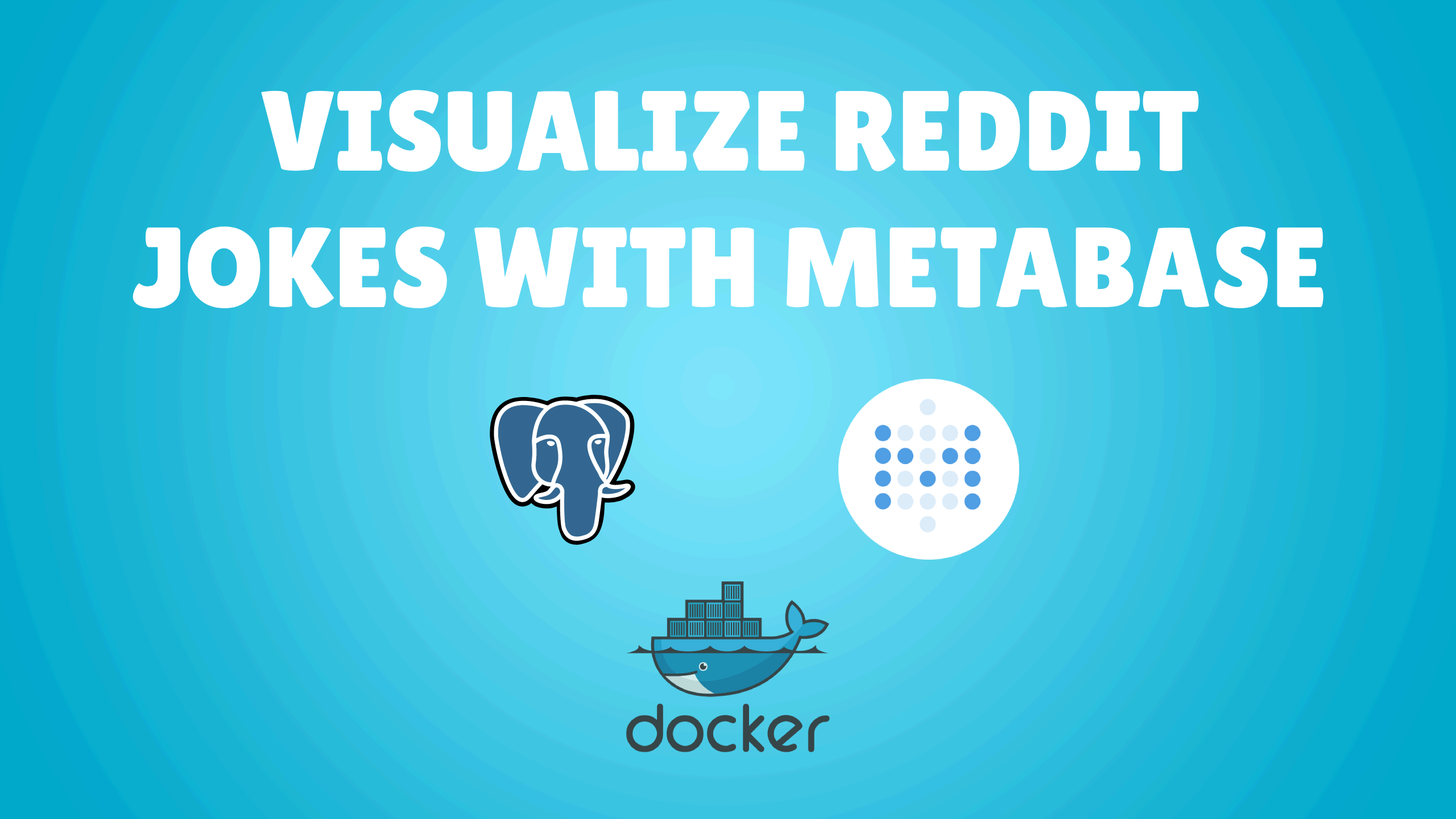
<style>
.page{position:relative;width:1456px;height:819px}
.page>*{position:absolute;margin:0}
.t1{font:113.7px "LilitaOne";color:#ffffff}
</style>
<div class="page">
<p class="t1" style="left:133px;top:90px;width:1190px;height:219px;text-align:center">VISUALIZE REDDIT <br>JOKES WITH METABASE</p>
</div>
